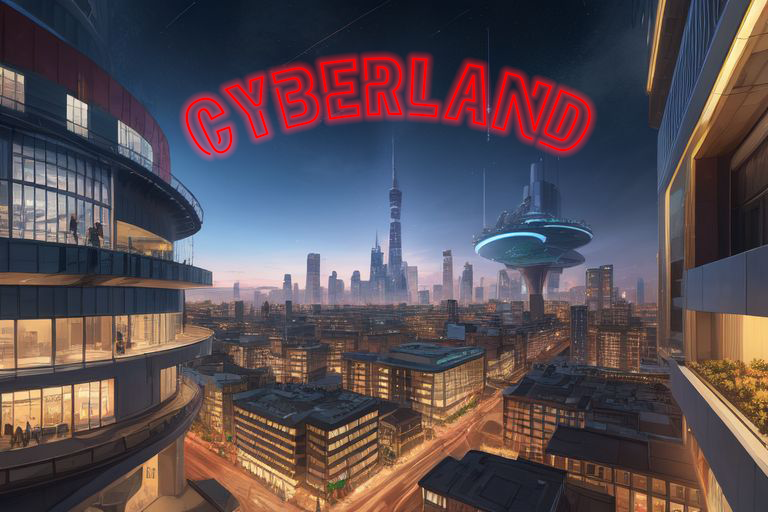
<style>
.page{position:relative;width:768px;height:512px}
.page>*{position:absolute;margin:0}
.t1{font:72px "Neoneon";color:#ff0000}
</style>
<div class="page">
<p class="t1" style="left:185px;top:57px;width:406px;height:99px">Cyberland</p>
</div>
